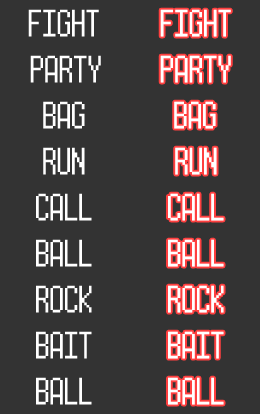
<style>
.page{position:relative;width:260px;height:414px;background:#333333}
.page>*{position:absolute;margin:0}
.t1{font:31.4px "Power-Red-and-Blue";color:#ffffff}
</style>
<div class="page">
<p class="t1" style="left:28px;top:9px;width:71px;height:28px">FIGHT</p>
<p class="t1" style="left:160px;top:9px;width:71px;height:28px">FIGHT</p>
<p class="t1" style="left:30px;top:55px;width:71px;height:28px">PARTY</p>
<p class="t1" style="left:160px;top:55px;width:71px;height:28px">PARTY</p>
<p class="t1" style="left:43px;top:101px;width:42px;height:28px">BAG</p>
<p class="t1" style="left:174px;top:101px;width:42px;height:28px">BAG</p>
<p class="t1" style="left:43px;top:147px;width:42px;height:28px">RUN</p>
<p class="t1" style="left:175px;top:147px;width:42px;height:28px">RUN</p>
<p class="t1" style="left:36px;top:193px;width:56px;height:28px">CALL</p>
<p class="t1" style="left:168px;top:193px;width:56px;height:28px">CALL</p>
<p class="t1" style="left:36px;top:239px;width:56px;height:28px">BALL</p>
<p class="t1" style="left:168px;top:239px;width:56px;height:28px">BALL</p>
<p class="t1" style="left:36px;top:285px;width:56px;height:28px">ROCK</p>
<p class="t1" style="left:168px;top:285px;width:56px;height:28px">ROCK</p>
<p class="t1" style="left:36px;top:331px;width:56px;height:28px">BAIT</p>
<p class="t1" style="left:168px;top:331px;width:56px;height:28px">BAIT</p>
<p class="t1" style="left:36px;top:377px;width:56px;height:28px">BALL</p>
<p class="t1" style="left:168px;top:377px;width:56px;height:28px">BALL</p>
</div>
